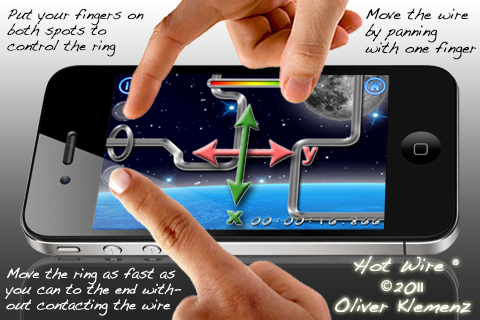
<style>
.page{position:relative;width:480px;height:320px}
.page>*{position:absolute;margin:0}
.t1{font:13px "Dakota";color:#000000;scale:0.92 1}
.t2{font:14px "Dakota";color:#000000;scale:0.92 1}
.t3{font:24px "Arial-Black"}
.t4{font:17px "Dakota";color:#ffffff}
.t5{font:17px "MyriadPro-Regular";color:#ffffff}
.t6{font:13px "Dakota";color:#ffffff;scale:0.92 1}
</style>
<div class="page">
<p class="t1" style="left:7px;top:8px;width:137px;height:49px">Put your fingers on <br>both spots to <br>control the ring</p>
<p class="t2" style="left:365px;top:8px;width:112px;height:52px">Move the wire<br>by panning <br>with one finger</p>
<p class="t3" style="left:302px;top:146px;width:16px;height:19px;rotate:4deg">y</p>
<p class="t3" style="left:226px;top:210px;width:17px;height:15px;rotate:4deg">x</p>
<p class="t4" style="left:335px;top:256px;width:136px;height:58px;text-align:center">Hot Wire <span class="t5">®</span><br><span class="t5">©</span>2011 <br>Oliver Klemenz</p>
<p class="t6" style="left:5px;top:267px;width:176px;height:49px">Move the ring as fast as <br>you can to the end with-<br>out contacting the wire</p>
</div>
